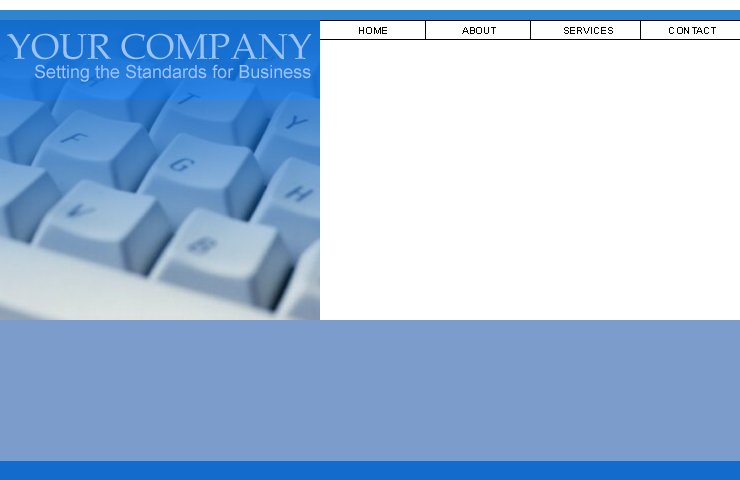
<style>
.page{position:relative;width:740px;height:480px;background:#ffffff}
.page>*{position:absolute;margin:0}
.t1{font:10px "ArialMT";color:#000000}
.t2{font:36px "BookAntiqua";color:#9bc3ff}
.t3{font:18px "ArialMT";color:#9bc3ff}
</style>
<div class="page">
<p class="t1" style="left:359px;top:27px;width:28px;height:7px">HOME</p>
<p class="t1" style="left:462px;top:27px;width:34px;height:7px">ABOUT</p>
<p class="t1" style="left:564px;top:27px;width:49px;height:7px">SERVICES</p>
<p class="t1" style="left:669px;top:27px;width:47px;height:7px">CONTACT</p>
<p class="t2" style="left:7px;top:33px;width:305px;height:27px">YOUR COMPANY</p>
<p class="t3" style="left:35px;top:64px;width:276px;height:18px">Setting the Standards for Business</p>
</div>
